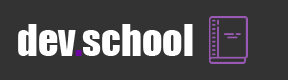
<style>
.page{position:relative;width:288px;height:80px;background:#333333}
.page>*{position:absolute;margin:0}
.t1{font:40px "Impact";color:#ffffff}
.t2{font:40px "Impact";color:#6c05a1}
</style>
<div class="page">
<p class="t1" style="left:18px;top:24px;width:175px;height:32px">dev<span class="t2">.</span>school</p>
</div>
